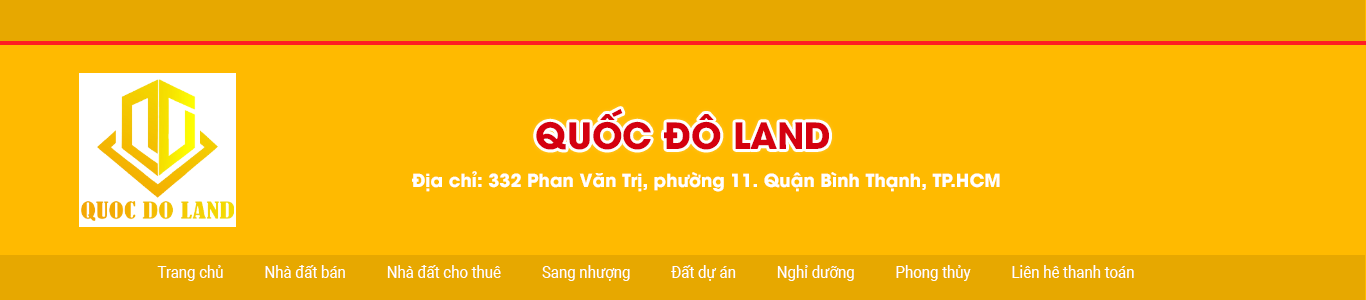
<style>
.page{position:relative;width:1366px;height:300px;background:#ffba00}
.page>*{position:absolute;margin:0}
.t1{font:36px "UTMAvoBold";color:#d4000f}
.t2{font:18px "UTMAvoBold";color:#ffffff}
.t3{font:16.5px "Roboto-Regular";color:#ffffff;scale:0.91 1}
</style>
<div class="page">
<p class="t1" style="left:536px;top:109px;width:293px;height:41px">QUỐC ĐÔ LAND</p>
<p class="t2" style="left:412px;top:171px;width:588px;height:21px">Địa chỉ: 332 Phan Văn Trị, phường 11. Quận Bình Thạnh, TP.HCM</p>
<p class="t3" style="left:157px;top:265px;width:977px;height:16px">Trang chủ           Nhà đất bán           Nhà đất cho thuê           Sang nhượng           Đất dự án           Nghỉ dưỡng           Phong thủy           Liên hê thanh toán</p>
</div>
